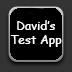
<style>
.page{position:relative;width:72px;height:72px;background:#000000}
.page>*{position:absolute;margin:0}
.t1{font:12px "ComicSansMS";color:#ffffff}
</style>
<div class="page">
<p class="t1" style="left:10px;top:20px;width:52px;height:27px;text-align:center">David’s<br>Test App</p>
</div>
